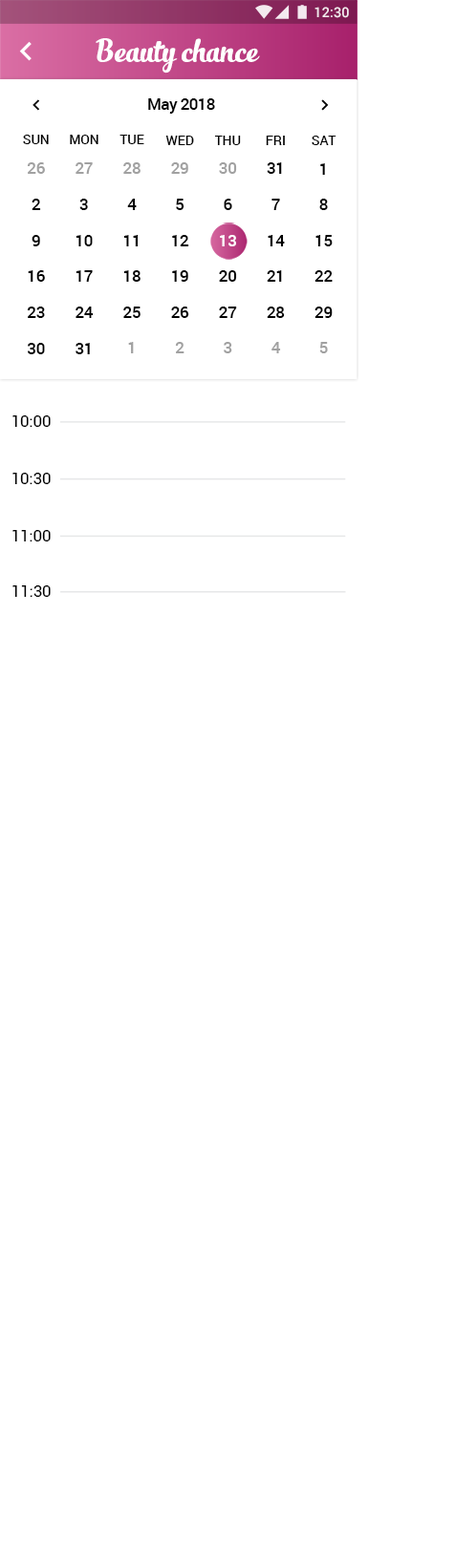
<style>
.page{position:relative;width:455px;height:1568px;background:#ffffff}
.page>*{position:absolute;margin:0}
.t1{font:13.9px "Roboto-Medium";color:#ffffff}
.t2{font:23.8px "SlimTony-Italic";color:#ffffff}
.t3{font:15.8px "Roboto-Medium";letter-spacing:-0.023em;color:#000000}
.t4{font:13.2px "Roboto-Medium";color:#000000}
.t5{font:15.8px "Roboto-Medium";color:#a1a1a1}
.t6{font:15.8px "Roboto-Medium";color:#000000}
.t7{font:15.8px "Roboto-Medium";color:#ffffff}
.t8{font:15.8px "Roboto-Regular";color:#000000}
.t9{font:16.1px "Roboto-Regular";color:#000000}
</style>
<div class="page">
<p class="t1" style="left:314px;top:7px;width:35px;height:11px">12:30</p>
<p class="t2" style="left:95px;top:38px;width:165px;height:36px">Beauty chance</p>
<p class="t3" style="left:148px;top:98px;width:67px;height:16px">May 2018</p>
<p class="t4" style="left:23px;top:135px;width:26px;height:9px">SUN</p>
<p class="t4" style="left:70px;top:135px;width:28px;height:9px">MON</p>
<p class="t4" style="left:119px;top:135px;width:25px;height:9px">TUE</p>
<p class="t4" style="left:165px;top:136px;width:29px;height:9px">WED</p>
<p class="t4" style="left:214px;top:136px;width:27px;height:9px">THU</p>
<p class="t4" style="left:265px;top:136px;width:20px;height:9px">FRI</p>
<p class="t4" style="left:311px;top:136px;width:25px;height:9px">SAT</p>
<p class="t5" style="left:27px;top:162px;width:18px;height:12px">26</p>
<p class="t5" style="left:75px;top:162px;width:18px;height:12px">27</p>
<p class="t5" style="left:123px;top:162px;width:17px;height:12px">28</p>
<p class="t5" style="left:171px;top:162px;width:17px;height:12px">29</p>
<p class="t5" style="left:219px;top:162px;width:18px;height:12px">30</p>
<p class="t6" style="left:266px;top:162px;width:16px;height:12px">31</p>
<p class="t6" style="left:320px;top:163px;width:5px;height:12px">1</p>
<p class="t6" style="left:32px;top:199px;width:9px;height:11px">2</p>
<p class="t6" style="left:79px;top:199px;width:9px;height:11px">3</p>
<p class="t6" style="left:127px;top:199px;width:10px;height:11px">4</p>
<p class="t6" style="left:176px;top:199px;width:8px;height:11px">5</p>
<p class="t6" style="left:223px;top:199px;width:9px;height:11px">6</p>
<p class="t6" style="left:271px;top:199px;width:9px;height:11px">7</p>
<p class="t6" style="left:319px;top:199px;width:9px;height:11px">8</p>
<p class="t6" style="left:32px;top:235px;width:8px;height:11px">9</p>
<p class="t6" style="left:75px;top:235px;width:18px;height:11px">10</p>
<p class="t6" style="left:123px;top:235px;width:15px;height:11px">11</p>
<p class="t6" style="left:172px;top:235px;width:17px;height:11px">12</p>
<p class="t7" style="left:220px;top:235px;width:16px;height:11px">13</p>
<p class="t6" style="left:267px;top:235px;width:18px;height:11px">14</p>
<p class="t6" style="left:315px;top:235px;width:17px;height:11px">15</p>
<p class="t6" style="left:28px;top:270px;width:17px;height:12px">16</p>
<p class="t6" style="left:75px;top:270px;width:18px;height:12px">17</p>
<p class="t6" style="left:123px;top:270px;width:17px;height:12px">18</p>
<p class="t6" style="left:172px;top:270px;width:16px;height:12px">19</p>
<p class="t6" style="left:219px;top:270px;width:18px;height:12px">20</p>
<p class="t6" style="left:266px;top:270px;width:16px;height:12px">21</p>
<p class="t6" style="left:314px;top:270px;width:18px;height:12px">22</p>
<p class="t6" style="left:27px;top:307px;width:18px;height:11px">23</p>
<p class="t6" style="left:75px;top:307px;width:19px;height:11px">24</p>
<p class="t6" style="left:123px;top:307px;width:17px;height:11px">25</p>
<p class="t6" style="left:171px;top:307px;width:18px;height:11px">26</p>
<p class="t6" style="left:219px;top:307px;width:18px;height:11px">27</p>
<p class="t6" style="left:266px;top:307px;width:19px;height:11px">28</p>
<p class="t6" style="left:314px;top:307px;width:18px;height:11px">29</p>
<p class="t5" style="left:128px;top:342px;width:6px;height:11px">1</p>
<p class="t5" style="left:175px;top:342px;width:9px;height:11px">2</p>
<p class="t5" style="left:223px;top:342px;width:9px;height:11px">3</p>
<p class="t5" style="left:271px;top:342px;width:10px;height:11px">4</p>
<p class="t5" style="left:319px;top:342px;width:9px;height:11px">5</p>
<p class="t6" style="left:28px;top:343px;width:17px;height:11px">30</p>
<p class="t6" style="left:75px;top:343px;width:15px;height:11px">31</p>
<p class="t8" style="left:12px;top:415px;width:39px;height:12px">10:00</p>
<p class="t8" style="left:12px;top:473px;width:39px;height:11px">10:30</p>
<p class="t8" style="left:12px;top:530px;width:39px;height:11px">11:00</p>
<p class="t9" style="left:12px;top:585px;width:39px;height:12px">11:30</p>
</div>
